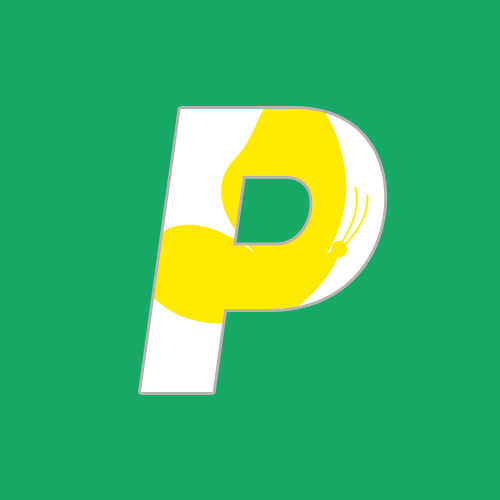
<style>
.page{position:relative;width:500px;height:500px;background:#17aa66}
.page>*{position:absolute;margin:0}
.t1{font:400px "UniSansHeavyItalicCAPS"}
</style>
<div class="page">
<p class="t1" style="left:141px;top:109px;width:244px;height:283px">P</p>
</div>
